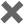
<style>
.page{position:relative;width:24px;height:24px;background:#ffffff}
.page>*{position:absolute;margin:0}
.t1{font:46px "GyeonggiTitleV";color:#646464}
</style>
<div class="page">
<p class="t1" style="left:0px;top:1px;width:24px;height:23px">×</p>
</div>
